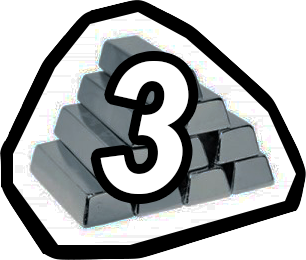
<style>
.page{position:relative;width:306px;height:260px;background:#ffffff}
.page>*{position:absolute;margin:0}
.t1{font:183.1px "Arial-BoldItalicMT";color:#ffffff;scale:0.94 1}
</style>
<div class="page">
<p class="t1" style="left:100px;top:61px;width:89px;height:133px">3</p>
</div>
